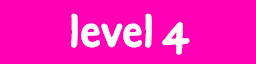
<style>
.page{position:relative;width:256px;height:64px;background:#ff00b4}
.page>*{position:absolute;margin:0}
.t1{font:48px "DuperPro-Bold";color:#ffffff}
</style>
<div class="page">
<p class="t1" style="left:71px;top:13px;width:119px;height:42px">level 4</p>
</div>
